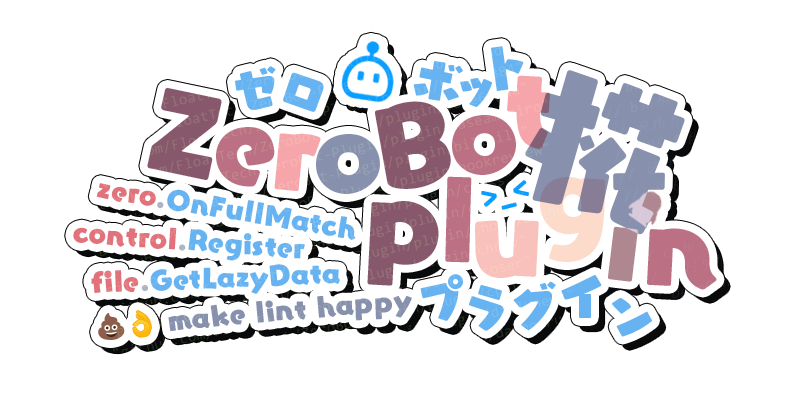
<style>
.page{position:relative;width:802px;height:409px;background:#ffffff}
.page>*{position:absolute;margin:0}
.t1{font:49.6px "YurukaStd-UB";color:#61afef}
.t2{font:99.1px "YurukaStd-UB";color:#f6a2a7}
.t3{font:150px "YurukaStd-UB";color:#838ca9}
.t4{font:99.1px "YurukaStd-UB";color:#835165}
.t5{font:99.1px "YurukaStd-UB";color:#b86a7e}
.t6{font:99.1px "YurukaStd-UB";color:#838ca9}
.t7{font:25px "YurukaStd-UB";color:#61afef}
.t8{font:25px "YurukaStd-UB";color:#e06c75}
.t9{font:25px "YurukaStd-UB";color:#abb2bf}
.t10{font:33.3px "YurukaStd-UB";color:#0099ff;font-weight:bold}
.t11{font:99.1px "YurukaStd-UB";color:#fcd9c8}
.t12{font:99.1px "YurukaStd-UB";color:#ac828b}
.t13{font:99.1px "YurukaStd-UB";color:#f9beb8}
.t14{font:49.9px "YurukaStd-UB";color:#61afef}
</style>
<div class="page">
<p class="t1" style="left:491px;top:46px;width:33px;height:45px;rotate:-8deg">ト</p>
<p class="t1" style="left:413px;top:61px;width:50px;height:40px;rotate:9deg">ボ</p>
<p class="t1" style="left:235px;top:66px;width:41px;height:44px;rotate:-11deg">ゼ</p>
<p class="t1" style="left:283px;top:72px;width:41px;height:40px;rotate:18deg">ロ</p>
<p class="t1" style="left:460px;top:78px;width:32px;height:29px">ッ</p>
<p class="t2" style="left:507px;top:75px;width:43px;height:74px">t</p>
<p class="t3" style="left:525px;top:70px;width:160px;height:165px;rotate:17deg">椛</p>
<p class="t4" style="left:147px;top:88px;width:75px;height:92px;rotate:9deg">Z</p>
<p class="t4" style="left:375px;top:101px;width:76px;height:88px;rotate:-7deg">B</p>
<p class="t5" style="left:452px;top:115px;width:64px;height:60px">o</p>
<p class="t5" style="left:216px;top:127px;width:59px;height:60px">e</p>
<p class="t2" style="left:274px;top:133px;width:47px;height:58px;rotate:9deg">r</p>
<p class="t6" style="left:316px;top:134px;width:64px;height:60px">o</p>
<p class="t7" style="left:96px;top:183px;width:260px;height:57px;rotate:9deg"><span class="t8">zero</span><span class="t9">.</span>OnFullMatch</p>
<p class="t5" style="left:445px;top:176px;width:27px;height:87px;rotate:1deg">l</p>
<p class="t10" style="left:481px;top:180px;width:48px;height:30px;rotate:-14deg">&gt;_&lt;</p>
<p class="t11" style="left:540px;top:177px;width:65px;height:85px">g</p>
<p class="t12" style="left:608px;top:196px;width:35px;height:86px;rotate:10deg">i</p>
<p class="t4" style="left:367px;top:201px;width:72px;height:85px">P</p>
<p class="t13" style="left:475px;top:220px;width:64px;height:58px">u</p>
<p class="t7" style="left:73px;top:227px;width:232px;height:34px;rotate:4deg"><span class="t8">control</span><span class="t9">.</span>Register</p>
<p class="t5" style="left:647px;top:228px;width:70px;height:62px">n</p>
<p class="t7" style="left:91px;top:264px;width:249px;height:30px;rotate:-2deg"><span class="t8">file</span><span class="t9">.</span>GetLazyData</p>
<p class="t1" style="left:420px;top:274px;width:43px;height:47px;rotate:-7deg">プ</p>
<p class="t14" style="left:513px;top:281px;width:43px;height:50px;rotate:-9deg">グ</p>
<p class="t14" style="left:561px;top:275px;width:41px;height:43px">イ</p>
<p class="t1" style="left:469px;top:285px;width:35px;height:46px;rotate:14deg">ラ</p>
<p class="t14" style="left:612px;top:298px;width:40px;height:39px">ン</p>
</div>
